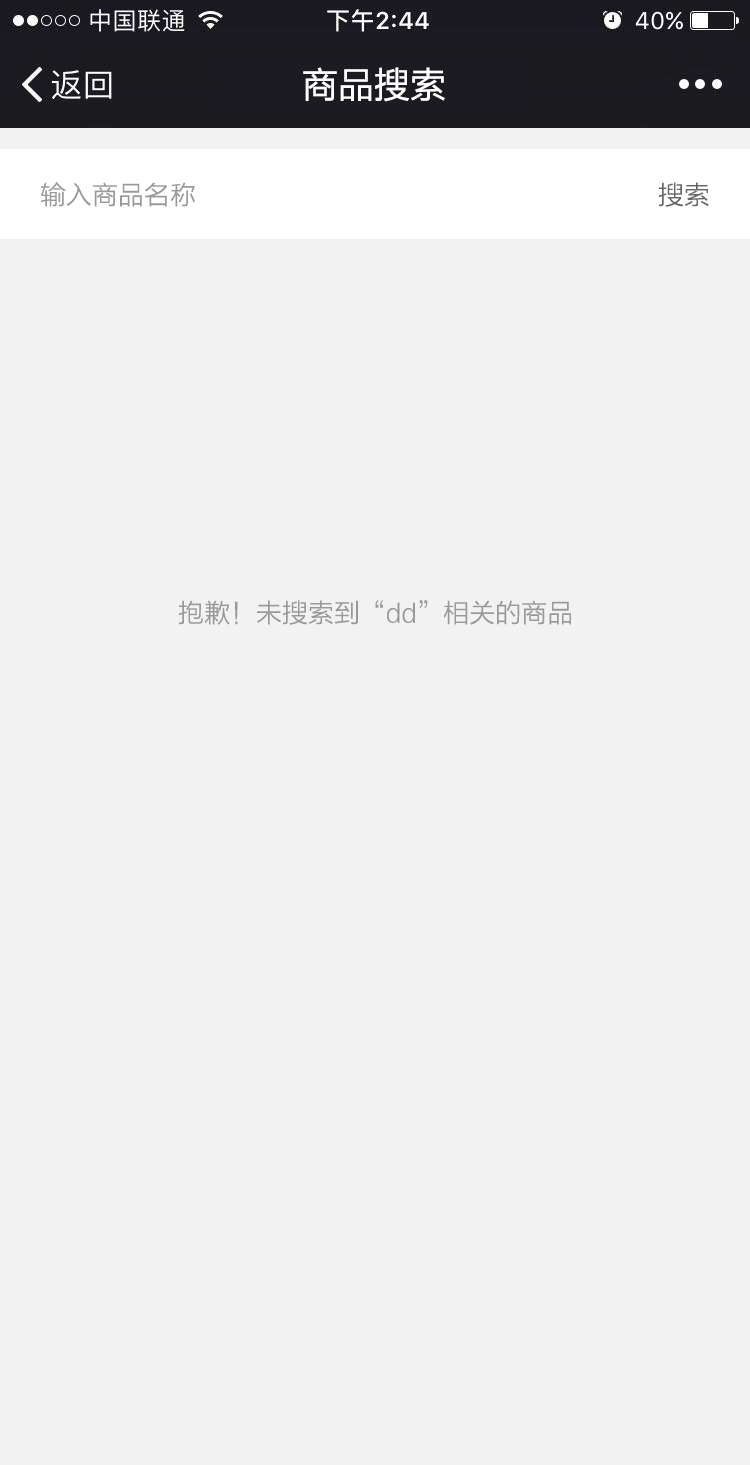
<style>
.page{position:relative;width:750px;height:1465px;background:#f2f2f2}
.page>*{position:absolute;margin:0}
.t1{font:36px "FZLTHK--GBK1-0";color:#ffffff}
.t2{font:26px "FZLTXHK";color:#999999}
.t3{font:26px "FZLTXHK";color:#666666}
</style>
<div class="page">
<p class="t1" style="left:303px;top:67px;width:142px;height:35px">商品搜索</p>
<p class="t2" style="left:41px;top:182px;width:154px;height:25px">输入商品名称</p>
<p class="t3" style="left:658px;top:182px;width:51px;height:25px">搜索</p>
<p class="t2" style="left:178px;top:600px;width:393px;height:25px">抱歉！未搜索到“dd”相关的商品</p>
</div>
